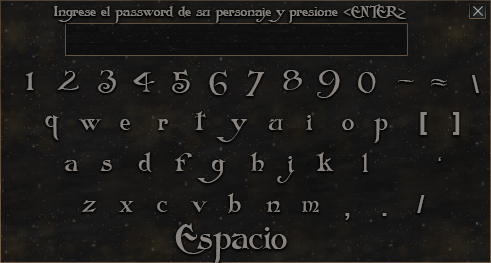
<style>
.page{position:relative;width:491px;height:263px}
.page>*{position:absolute;margin:0}
.t1{font:13.9px "Folkard";color:#88837e}
.t2{font:13.9px "MyriadPro-Regular";color:#88837e}
.t3{font:25.3px "Folkard";color:#88837e}
.t4{font:24.8px "Arial-BoldMT";color:#88837e}
.t5{font:20.3px "Folkard";color:#88837e}
.t6{font:24.8px "Folkard";color:#88837e}
.t7{font:12.1px "Arial-BoldMT";color:#88837e}
.t8{font:33.7px "Folkard";color:#88837e}
</style>
<div class="page">
<p class="t1" style="left:54px;top:4px;width:352px;height:19px">Ingrese el password de su personaje y presione <span class="t2">&lt;</span>ENTER<span class="t2">&gt;</span></p>
<p class="t3" style="left:26px;top:72px;width:8px;height:18px">1</p>
<p class="t3" style="left:57px;top:70px;width:22px;height:20px">2</p>
<p class="t3" style="left:98px;top:70px;width:18px;height:23px">3</p>
<p class="t3" style="left:133px;top:72px;width:22px;height:20px">4</p>
<p class="t3" style="left:172px;top:69px;width:18px;height:24px">5</p>
<p class="t3" style="left:209px;top:70px;width:18px;height:25px">6</p>
<p class="t3" style="left:246px;top:70px;width:19px;height:26px">7</p>
<p class="t3" style="left:283px;top:70px;width:19px;height:20px">8</p>
<p class="t3" style="left:317px;top:70px;width:23px;height:28px">9</p>
<p class="t3" style="left:358px;top:72px;width:18px;height:21px">0</p>
<p class="t4" style="left:472px;top:75px;width:7px;height:18px">\</p>
<p class="t5" style="left:398px;top:80px;width:16px;height:2px">-</p>
<p class="t6" style="left:431px;top:79px;width:16px;height:7px">=</p>
<p class="t3" style="left:194px;top:111px;width:12px;height:19px">t</p>
<p class="t4" style="left:420px;top:112px;width:7px;height:23px">[</p>
<p class="t4" style="left:453px;top:112px;width:7px;height:23px">]</p>
<p class="t3" style="left:45px;top:115px;width:14px;height:25px">q</p>
<p class="t3" style="left:79px;top:119px;width:23px;height:11px">w</p>
<p class="t3" style="left:120px;top:119px;width:10px;height:11px">e</p>
<p class="t3" style="left:158px;top:119px;width:10px;height:11px">r</p>
<p class="t3" style="left:216px;top:119px;width:31px;height:23px">y</p>
<p class="t3" style="left:268px;top:119px;width:15px;height:11px">u</p>
<p class="t3" style="left:306px;top:115px;width:6px;height:15px">i</p>
<p class="t3" style="left:342px;top:119px;width:12px;height:11px">o</p>
<p class="t3" style="left:374px;top:118px;width:14px;height:25px">p</p>
<p class="t3" style="left:64px;top:160px;width:14px;height:11px">a</p>
<p class="t3" style="left:100px;top:160px;width:12px;height:11px">s</p>
<p class="t3" style="left:138px;top:152px;width:14px;height:20px">d</p>
<p class="t3" style="left:174px;top:153px;width:18px;height:18px">f</p>
<p class="t3" style="left:197px;top:159px;width:29px;height:24px">g</p>
<p class="t3" style="left:250px;top:152px;width:14px;height:19px">h</p>
<p class="t3" style="left:277px;top:156px;width:18px;height:27px">j</p>
<p class="t3" style="left:316px;top:152px;width:18px;height:19px">k</p>
<p class="t3" style="left:362px;top:153px;width:6px;height:19px">l</p>
<p class="t7" style="left:438px;top:157px;width:3px;height:4px">‘</p>
<p class="t3" style="left:227px;top:193px;width:14px;height:20px">b</p>
<p class="t4" style="left:417px;top:195px;width:8px;height:18px;rotate:180deg">\</p>
<p class="t3" style="left:82px;top:200px;width:14px;height:12px">z</p>
<p class="t3" style="left:119px;top:201px;width:15px;height:11px">x</p>
<p class="t3" style="left:157px;top:201px;width:11px;height:11px">c</p>
<p class="t3" style="left:191px;top:201px;width:17px;height:11px">v</p>
<p class="t3" style="left:266px;top:201px;width:14px;height:11px">n</p>
<p class="t3" style="left:302px;top:201px;width:17px;height:11px">m</p>
<p class="t4" style="left:345px;top:213px;width:5px;height:7px">,</p>
<p class="t4" style="left:382px;top:213px;width:5px;height:3px">.</p>
<p class="t8" style="left:175px;top:223px;width:112px;height:42px">Espacio</p>
</div>
